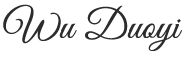
<style>
.page{position:relative;width:185px;height:70px;background:#ffffff}
.page>*{position:absolute;margin:0}
.t1{font:41px "GreatVibes-Regular";color:#2c2c2c}
</style>
<div class="page">
<p class="t1" style="left:3px;top:4px;width:179px;height:47px">Wu Duoyi</p>
</div>
